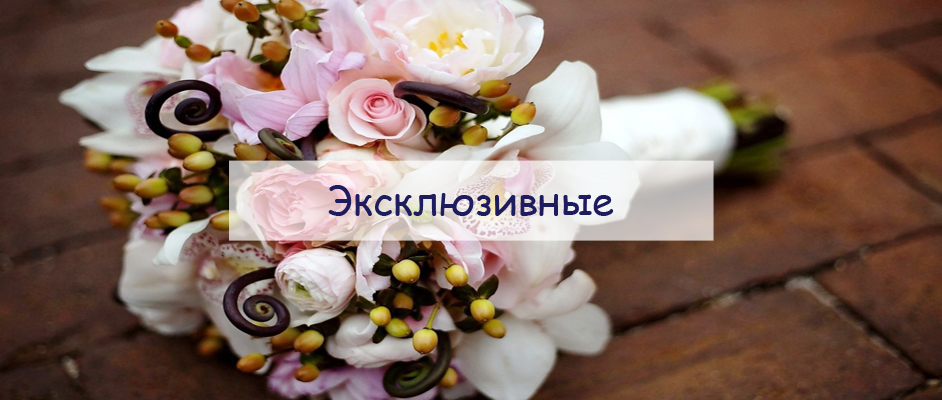
<style>
.page{position:relative;width:942px;height:400px}
.page>*{position:absolute;margin:0}
.t1{font:40px "ComicSansMS";color:#1d1c5e}
</style>
<div class="page">
<p class="t1" style="left:328px;top:185px;width:286px;height:31px">Эксклюзивные</p>
</div>
